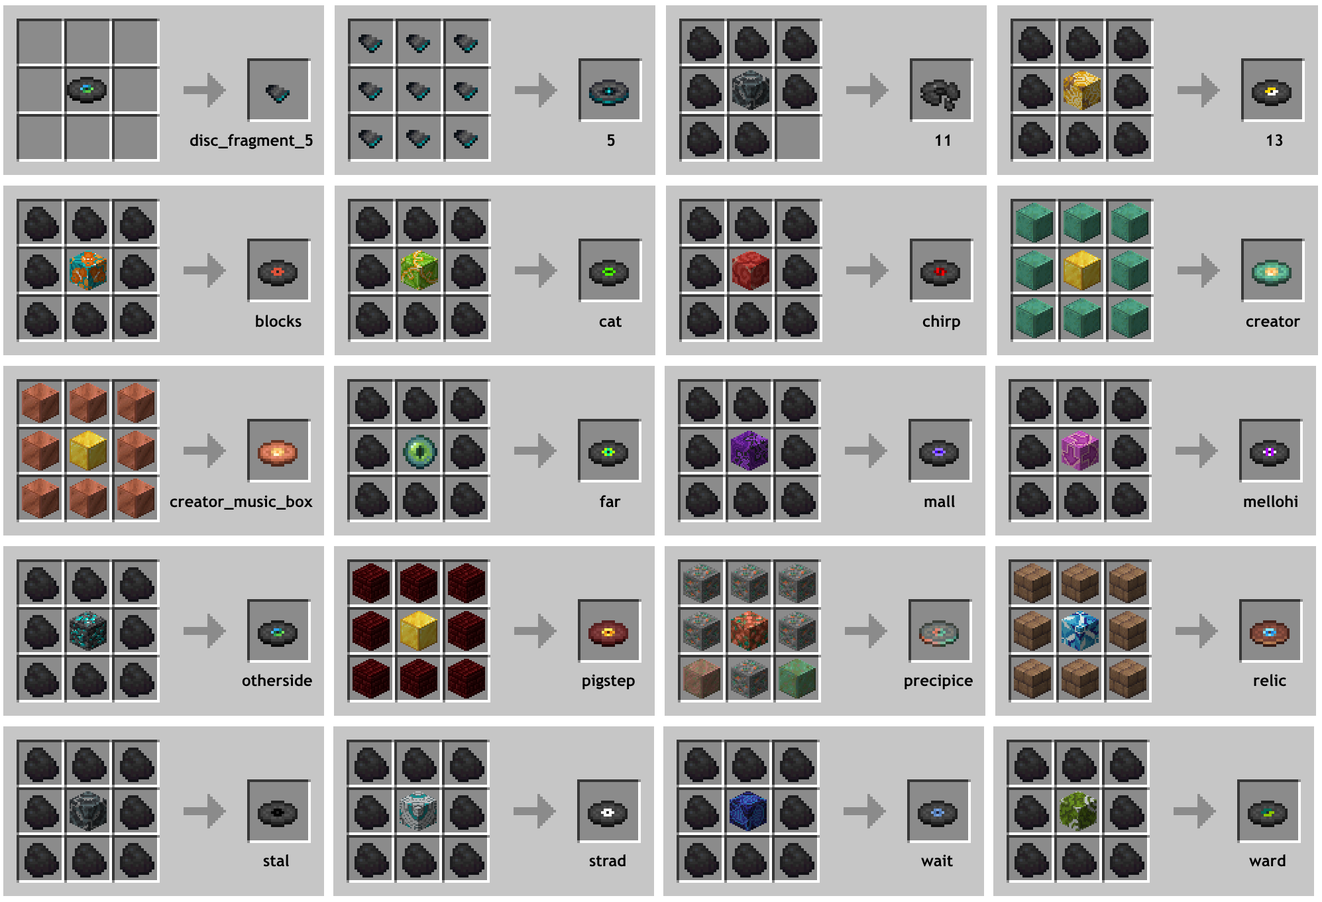
<style>
.page{position:relative;width:1322px;height:902px;background:#c6c6c6}
.page>*{position:absolute;margin:0}
.t1{font:15.9px "TrebuchetMS-Bold";color:#000000}
</style>
<div class="page">
<p class="t1" style="left:190px;top:134px;width:123px;height:15px">disc_fragment_5</p>
<p class="t1" style="left:607px;top:134px;width:8px;height:12px">5</p>
<p class="t1" style="left:936px;top:134px;width:14px;height:12px">11</p>
<p class="t1" style="left:1267px;top:134px;width:16px;height:12px">13</p>
<p class="t1" style="left:256px;top:315px;width:46px;height:12px">blocks</p>
<p class="t1" style="left:599px;top:315px;width:23px;height:12px">cat</p>
<p class="t1" style="left:922px;top:315px;width:38px;height:15px">chirp</p>
<p class="t1" style="left:1246px;top:315px;width:55px;height:12px">creator</p>
<p class="t1" style="left:170px;top:495px;width:143px;height:15px">creator_music_box</p>
<p class="t1" style="left:600px;top:495px;width:21px;height:13px">far</p>
<p class="t1" style="left:924px;top:495px;width:31px;height:13px">mall</p>
<p class="t1" style="left:1244px;top:495px;width:54px;height:13px">mellohi</p>
<p class="t1" style="left:242px;top:674px;width:70px;height:13px">otherside</p>
<p class="t1" style="left:583px;top:674px;width:52px;height:15px">pigstep</p>
<p class="t1" style="left:905px;top:674px;width:68px;height:15px">precipice</p>
<p class="t1" style="left:1254px;top:674px;width:32px;height:13px">relic</p>
<p class="t1" style="left:263px;top:854px;width:27px;height:13px">stal</p>
<p class="t1" style="left:589px;top:854px;width:37px;height:13px">strad</p>
<p class="t1" style="left:921px;top:854px;width:32px;height:13px">wait</p>
<p class="t1" style="left:1249px;top:854px;width:37px;height:13px">ward</p>
</div>
